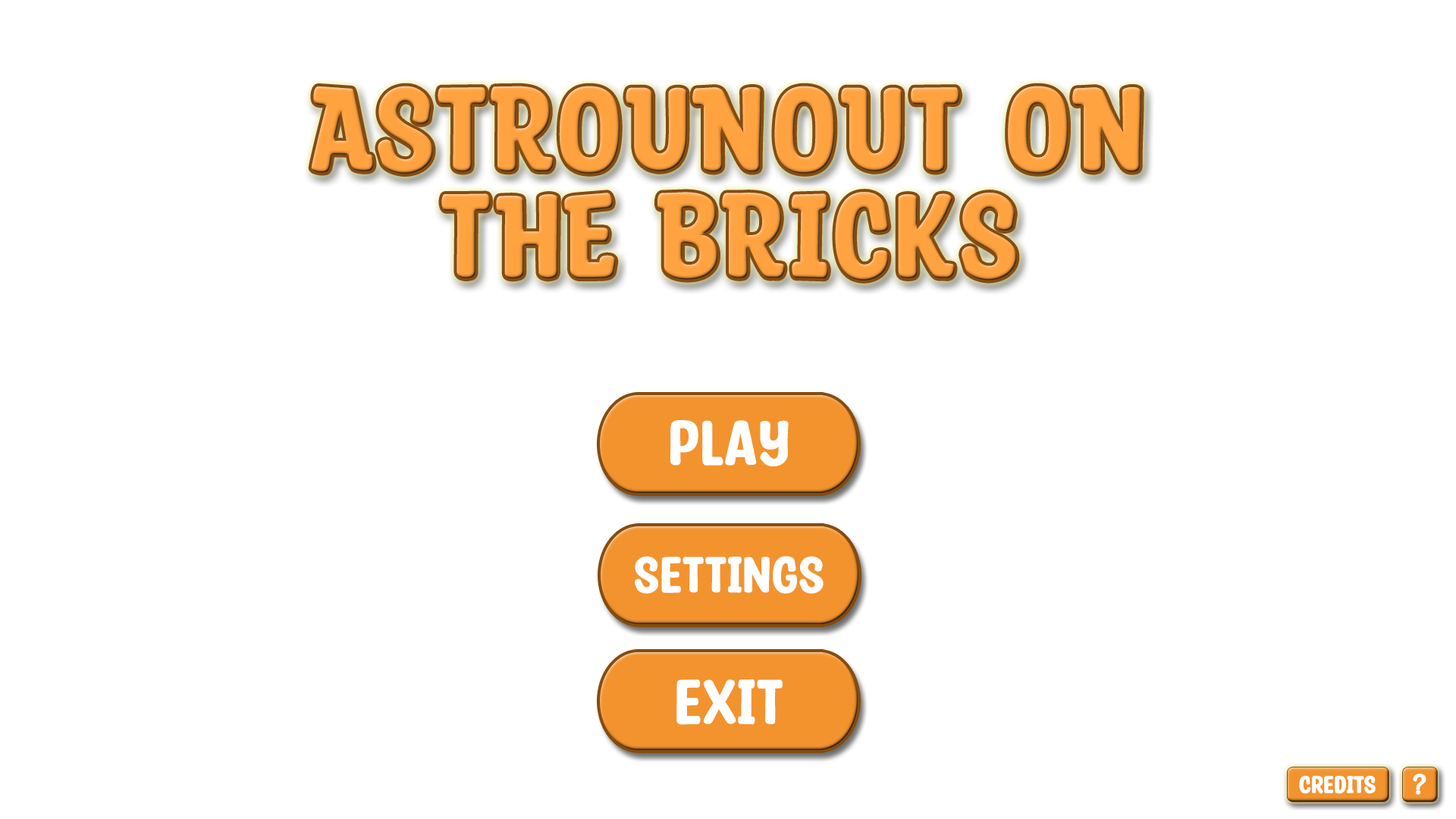
<style>
.page{position:relative;width:1456px;height:819px;background:#ffffff}
.page>*{position:absolute;margin:0}
.t1{font:125.4px/106.5px "PartyConfetti-Regular";letter-spacing:0.02em;color:#f2932e;font-weight:bold}
.t2{font:66px "PartyConfetti-Regular";color:#ffffff;font-weight:bold}
.t3{font:52.8px "PartyConfetti-Regular";color:#ffffff;font-weight:bold}
.t4{font:30.4px "PartyConfetti-Regular";color:#ffffff;font-weight:bold}
.t5{font:24.8px "PartyConfetti-Regular";color:#ffffff;font-weight:bold}
</style>
<div class="page">
<p class="t1" style="left:311px;top:86px;width:830px;height:195px;text-align:center">ASTROUNOUT ON<br>THE BRICKS</p>
<p class="t2" style="left:670px;top:420px;width:119px;height:46px">play</p>
<p class="t3" style="left:635px;top:556px;width:189px;height:38px">settings</p>
<p class="t2" style="left:676px;top:679px;width:107px;height:46px">exit</p>
<p class="t4" style="left:1413px;top:773px;width:13px;height:22px">?</p>
<p class="t5" style="left:1299px;top:776px;width:77px;height:18px">credits</p>
</div>
